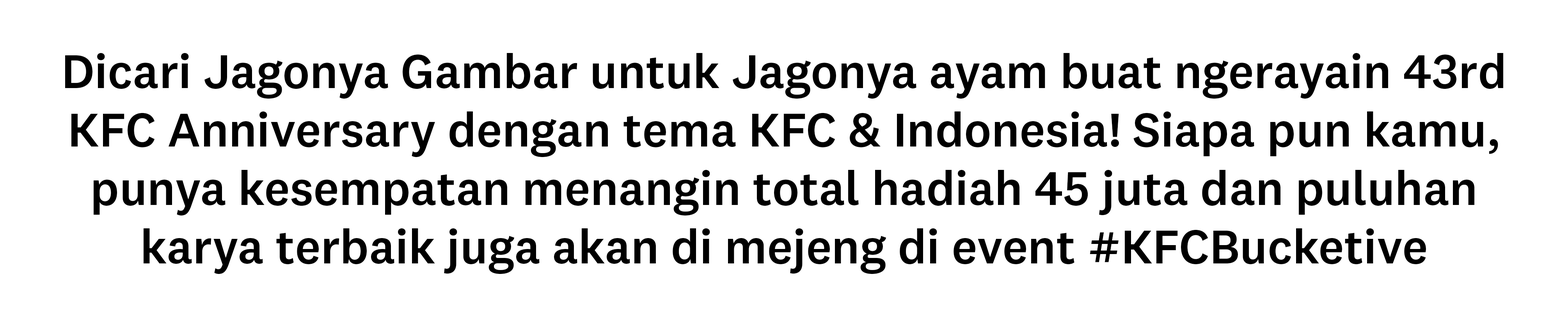
<style>
.page{position:relative;width:1568px;height:309px;background:#ffffff}
.page>*{position:absolute;margin:0}
.t1{font:48.8px "National2-Medium";color:#000000}
</style>
<div class="page">
<p class="t1" style="left:65px;top:53px;width:1438px;height:222px;text-align:center">Dicari Jagonya Gambar untuk Jagonya ayam buat ngerayain 43rd<br>KFC Anniversary dengan tema KFC &amp; Indonesia! Siapa pun kamu,<br>punya kesempatan menangin total hadiah 45 juta dan puluhan<br>karya terbaik juga akan di mejeng di event #KFCBucketive</p>
</div>
